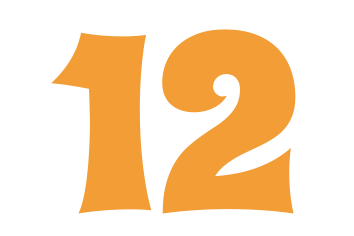
<style>
.page{position:relative;width:354px;height:236px;background:#ffffff}
.page>*{position:absolute;margin:0}
.t1{font:250px "SpicyRice-Regular";color:#f29d35}
</style>
<div class="page">
<p class="t1" style="left:51px;top:29px;width:245px;height:185px">12</p>
</div>
